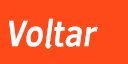
<style>
.page{position:relative;width:128px;height:64px;background:#fe4a18}
.page>*{position:absolute;margin:0}
.t1{font:37.8px "FogSansIt";color:#ffffff;scale:0.87 1}
</style>
<div class="page">
<p class="t1" style="left:9px;top:18px;width:89px;height:31px">Voltar</p>
</div>
